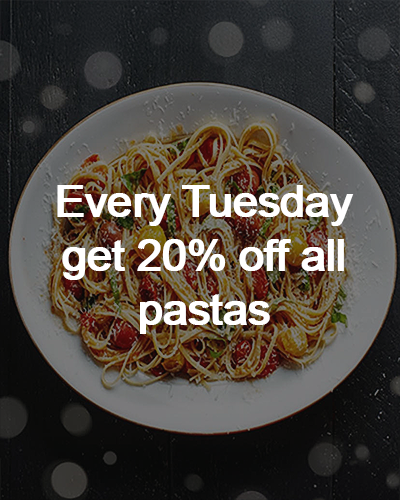
<style>
.page{position:relative;width:400px;height:500px}
.page>*{position:absolute;margin:0}
.t1{font:45px "ArialMT";color:#ffffff}
</style>
<div class="page">
<p class="t1" style="left:57px;top:185px;width:295px;height:149px;text-align:center">Every Tuesday get 20% off all pastas</p>
<p class="t1" style="left:59px;top:185px;width:295px;height:149px;text-align:center">Every Tuesday get 20% off all pastas</p>
</div>
